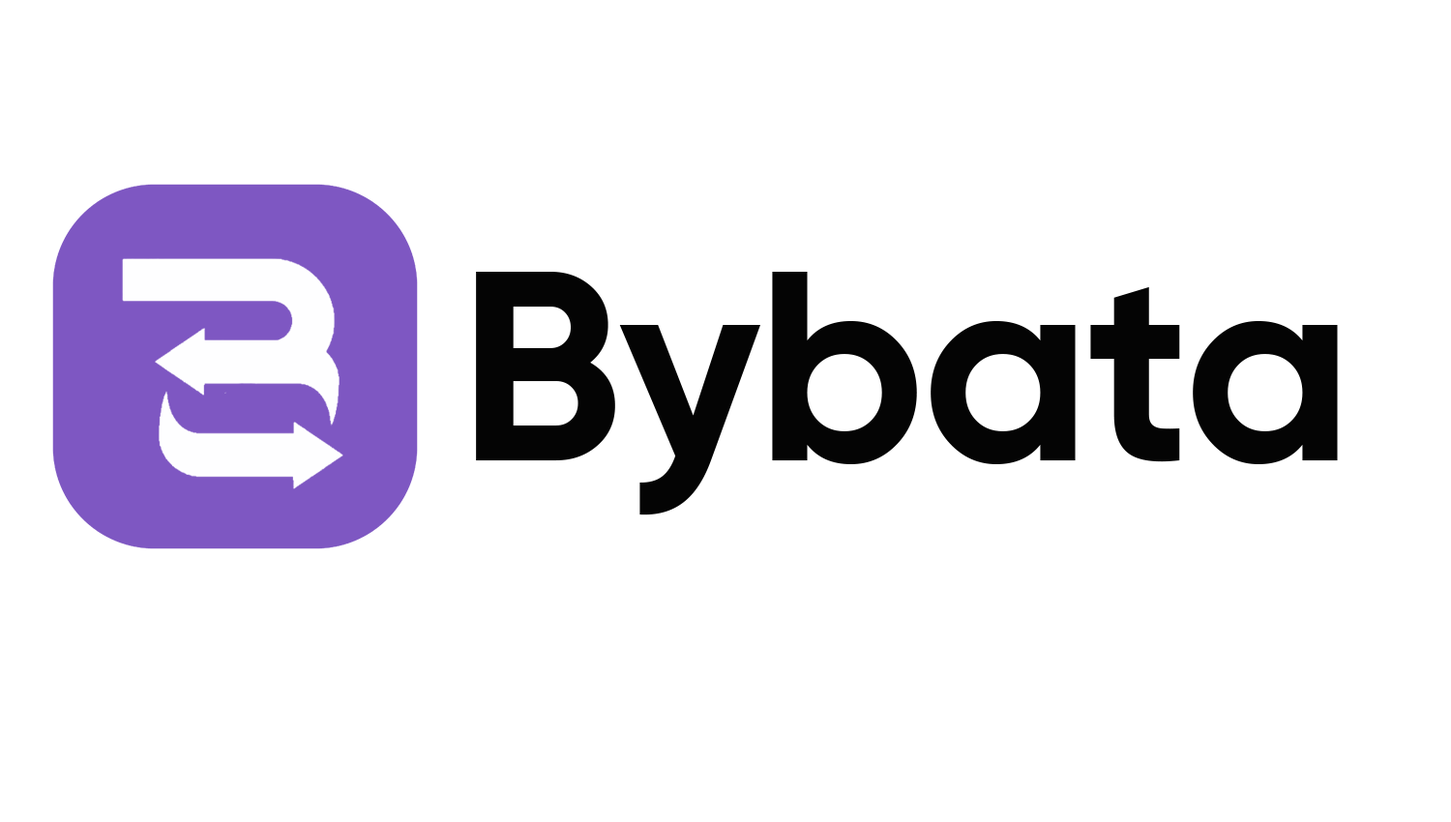
<style>
.page{position:relative;width:1451px;height:822px;background:#ffffff}
.page>*{position:absolute;margin:0}
.t1{font:269.8px "Gilroy-Bold";color:#040404}
</style>
<div class="page">
<p class="t1" style="left:476px;top:272px;width:861px;height:243px">Bybata</p>
</div>
